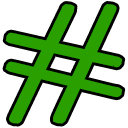
<style>
.page{position:relative;width:128px;height:128px;background:#ffffff}
.page>*{position:absolute;margin:0}
.t1{font:148px "CalifornianFB-Bold";color:#2aa000;font-weight:bold;scale:1.37 1}
</style>
<div class="page">
<p class="t1" style="left:5px;top:4px;width:118px;height:120px">#</p>
</div>
